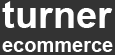
<style>
.page{position:relative;width:115px;height:55px;background:#333333}
.page>*{position:absolute;margin:0}
.t1{font:20px "Arial-BoldMT";color:#ffffff}
.t2{font:38px "Arial-BoldMT";color:#ffffff}
</style>
<div class="page">
<p class="t1" style="left:2px;top:1px;width:111px;height:51px"><span class="t2">turner<br></span>ecommerce</p>
</div>
